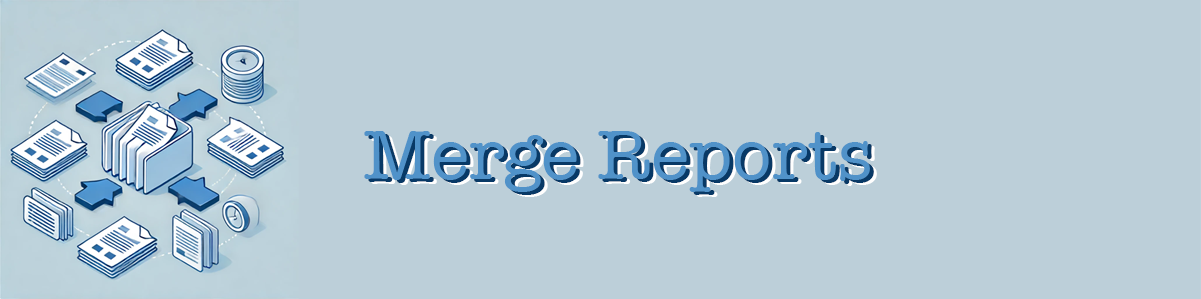
<style>
.page{position:relative;width:1201px;height:299px;background:#bccfd9}
.page>*{position:absolute;margin:0}
.t1{font:72px "AmericanTypewriter";color:#5092c9}
.t2{font:72px "AmericanTypewriter"}
</style>
<div class="page">
<p class="t1" style="left:364px;top:131px;width:506px;height:61px">Merge Reports</p>
<p class="t2" style="left:368px;top:134px;width:506px;height:61px">Merge Reports</p>
</div>
